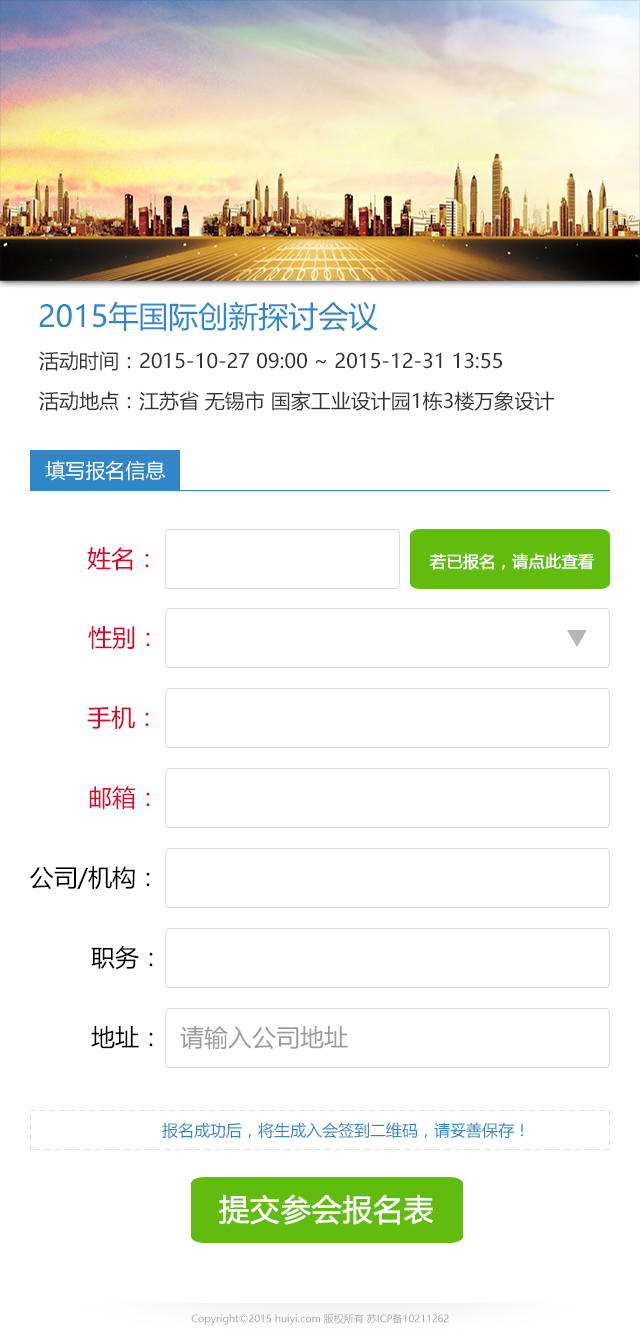
<style>
.page{position:relative;width:640px;height:1336px;background:#ffffff}
.page>*{position:absolute;margin:0}
.t1{font:30px "MicrosoftYaHei";color:#2f86c9;text-transform:uppercase}
.t2{font:20px "MicrosoftYaHei";color:#333333}
.t3{font:20px "MicrosoftYaHei";color:#ffffff;text-transform:uppercase}
.t4{font:24px "MicrosoftYaHei";color:#db0529}
.t5{font:16px "MicrosoftYaHei";color:#ffffff;font-weight:bold}
.t6{font:24px "MicrosoftYaHei";color:#000000}
.t7{font:24px "MicrosoftYaHei";color:#a19999}
.t8{font:16px "MicrosoftYaHei";color:#2f86c9}
.t9{font:30px "MicrosoftYaHei";color:#ffffff;font-weight:bold}
.t10{font:10px "MicrosoftYaHei";color:#aaaaaa}
</style>
<div class="page">
<p class="t1" style="left:39px;top:301px;width:339px;height:31px">2015年国际创新探讨会议</p>
<p class="t2" style="left:39px;top:351px;width:463px;height:20px">活动时间：2015-10-27 09:00 ~ 2015-12-31 13:55</p>
<p class="t2" style="left:39px;top:391px;width:515px;height:20px">活动地点：江苏省 无锡市 国家工业设计园1栋3楼万象设计</p>
<p class="t3" style="left:45px;top:460px;width:121px;height:21px">填写报名信息</p>
<p class="t4" style="left:87px;top:547px;width:62px;height:24px">姓名：</p>
<p class="t5" style="left:430px;top:553px;width:164px;height:17px">若已报名，请点此查看</p>
<p class="t4" style="left:88px;top:626px;width:62px;height:24px">性别：</p>
<p class="t4" style="left:87px;top:706px;width:62px;height:24px">手机：</p>
<p class="t4" style="left:89px;top:786px;width:61px;height:24px">邮箱：</p>
<p class="t6" style="left:30px;top:866px;width:120px;height:24px">公司/机构：</p>
<p class="t6" style="left:91px;top:945px;width:62px;height:25px">职务：</p>
<p class="t6" style="left:91px;top:1026px;width:62px;height:23px">地址：</p>
<p class="t7" style="left:180px;top:1026px;width:168px;height:24px">请输入公司地址</p>
<p class="t8" style="left:162px;top:1122px;width:361px;height:17px">报名成功后，将生成入会签到二维码，请妥善保存！</p>
<p class="t9" style="left:219px;top:1194px;width:215px;height:31px">提交参会报名表</p>
<p class="t10" style="left:191px;top:1313px;width:258px;height:12px">Copyright©2015 huiyi.com 版权所有 苏ICP备10211262</p>
</div>
